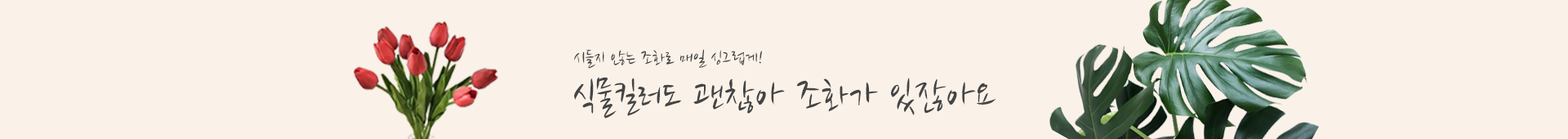
<style>
.page{position:relative;width:1568px;height:139px;background:#faf2e9}
.page>*{position:absolute;margin:0}
.t1{font:19.6px "NanumBrush";color:#444444}
.t2{font:41.8px "NanumBrush";color:#444444}
</style>
<div class="page">
<p class="t1" style="left:574px;top:49px;width:188px;height:20px">시들지 않는 조화로 매일 싱그럽게!</p>
<p class="t2" style="left:574px;top:77px;width:422px;height:41px">식물킬러도 괜찮아 조화가 있잖아요</p>
</div>
